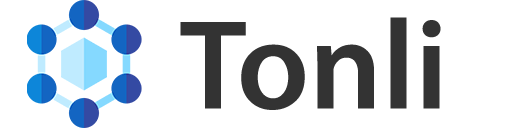
<style>
.page{position:relative;width:512px;height:128px;background:#ffffff}
.page>*{position:absolute;margin:0}
.t1{font:128px "MyriadPro-Semibold";color:#333333}
</style>
<div class="page">
<p class="t1" style="left:180px;top:17px;width:261px;height:93px">Tonli</p>
</div>
